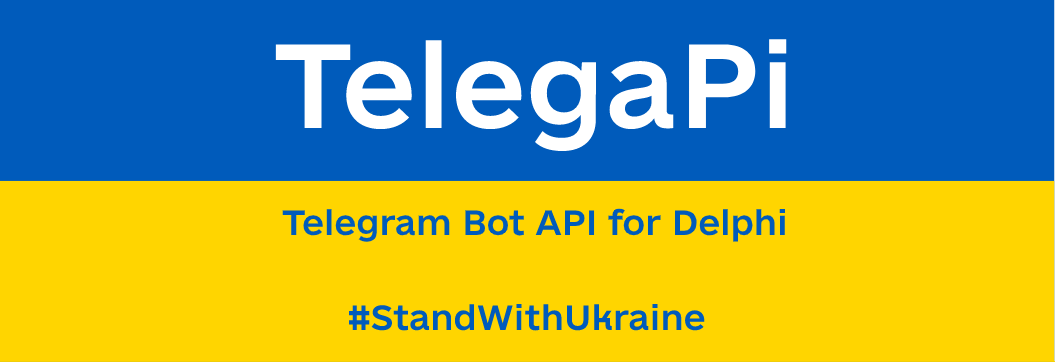
<style>
.page{position:relative;width:1055px;height:362px;background:#ffd500}
.page>*{position:absolute;margin:0}
.t1{font:112.3px "e-UkraineHead-LOGO";color:#ffffff}
.t2{font:33px "e-UkraineHead-LOGO";color:#005bbb}
</style>
<div class="page">
<p class="t1" style="left:275px;top:39px;width:512px;height:113px">TelegaPi</p>
<p class="t2" style="left:282px;top:208px;width:503px;height:34px">Telegram Bot API for Delphi</p>
<p class="t2" style="left:349px;top:303px;width:356px;height:28px">#StandWithUkraine</p>
</div>
